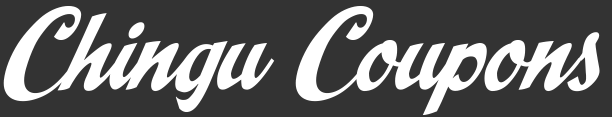
<style>
.page{position:relative;width:612px;height:117px;background:#333333}
.page>*{position:absolute;margin:0}
.t1{font:125px "CCSpillsMedium";color:#ffffff}
</style>
<div class="page">
<p class="t1" style="left:3px;top:6px;width:597px;height:109px">Chingu Coupons</p>
</div>
